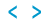
<style>
.page{position:relative;width:48px;height:24px;background:#ffffff}
.page>*{position:absolute;margin:0}
.t1{font:25px "MyriadPro-Bold";color:#0099cc;scale:0.69 1}
</style>
<div class="page">
<p class="t1" style="left:8px;top:5px;width:33px;height:14px">&lt;    &gt;</p>
</div>
